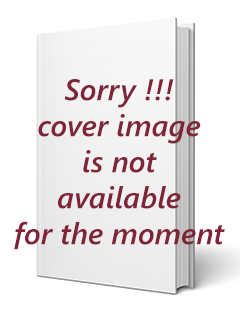
<style>
.page{position:relative;width:240px;height:320px;background:#ffffff}
.page>*{position:absolute;margin:0}
.t1{font:30px "SegoeUI-SemiboldItalic";color:#802438}
</style>
<div class="page">
<p class="t1" style="left:14px;top:79px;width:211px;height:171px;text-align:center">Sorry !!!<br>cover image<br>is not <br>available<br>for the moment</p>
</div>
